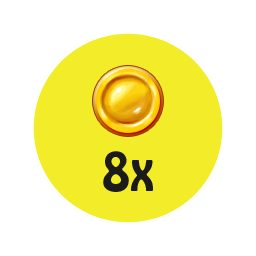
<style>
.page{position:relative;width:256px;height:256px;background:#ffffff}
.page>*{position:absolute;margin:0}
.t1{font:48px "HoboStd";color:#1b1b1b}
</style>
<div class="page">
<p class="t1" style="left:103px;top:151px;width:50px;height:41px">8x</p>
</div>
